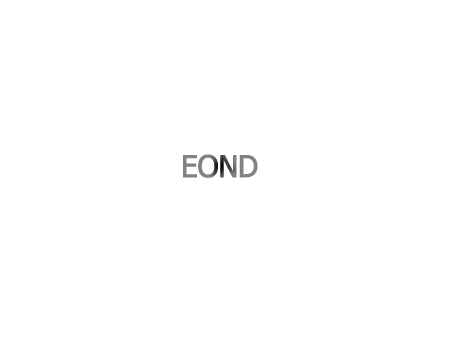
<style>
.page{position:relative;width:454px;height:340px;background:#ffffff}
.page>*{position:absolute;margin:0}
.t1{font:30px "Tahoma";letter-spacing:-0.04em;color:#828282;font-weight:bold}
</style>
<div class="page">
<p class="t1" style="left:183px;top:154px;width:75px;height:24px">EOND</p>
</div>
